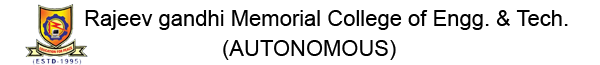
<style>
.page{position:relative;width:600px;height:65px;background:#ffffff}
.page>*{position:absolute;margin:0}
.t1{font:22px "ArialMT";color:#000000}
</style>
<div class="page">
<p class="t1" style="left:85px;top:10px;width:483px;height:20px">Rajeev gandhi Memorial College of Engg. &amp; Tech.</p>
<p class="t1" style="left:223px;top:40px;width:173px;height:20px">(AUTONOMOUS)</p>
</div>
